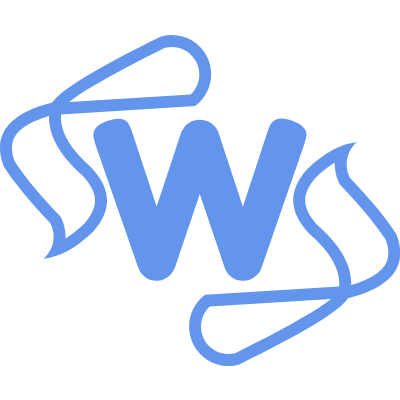
<style>
.page{position:relative;width:400px;height:400px;background:#ffffff}
.page>*{position:absolute;margin:0}
.t1{font:220px "FredokaOne-Regular";color:#6495ed}
</style>
<div class="page">
<p class="t1" style="left:93px;top:118px;width:214px;height:163px">W</p>
</div>
